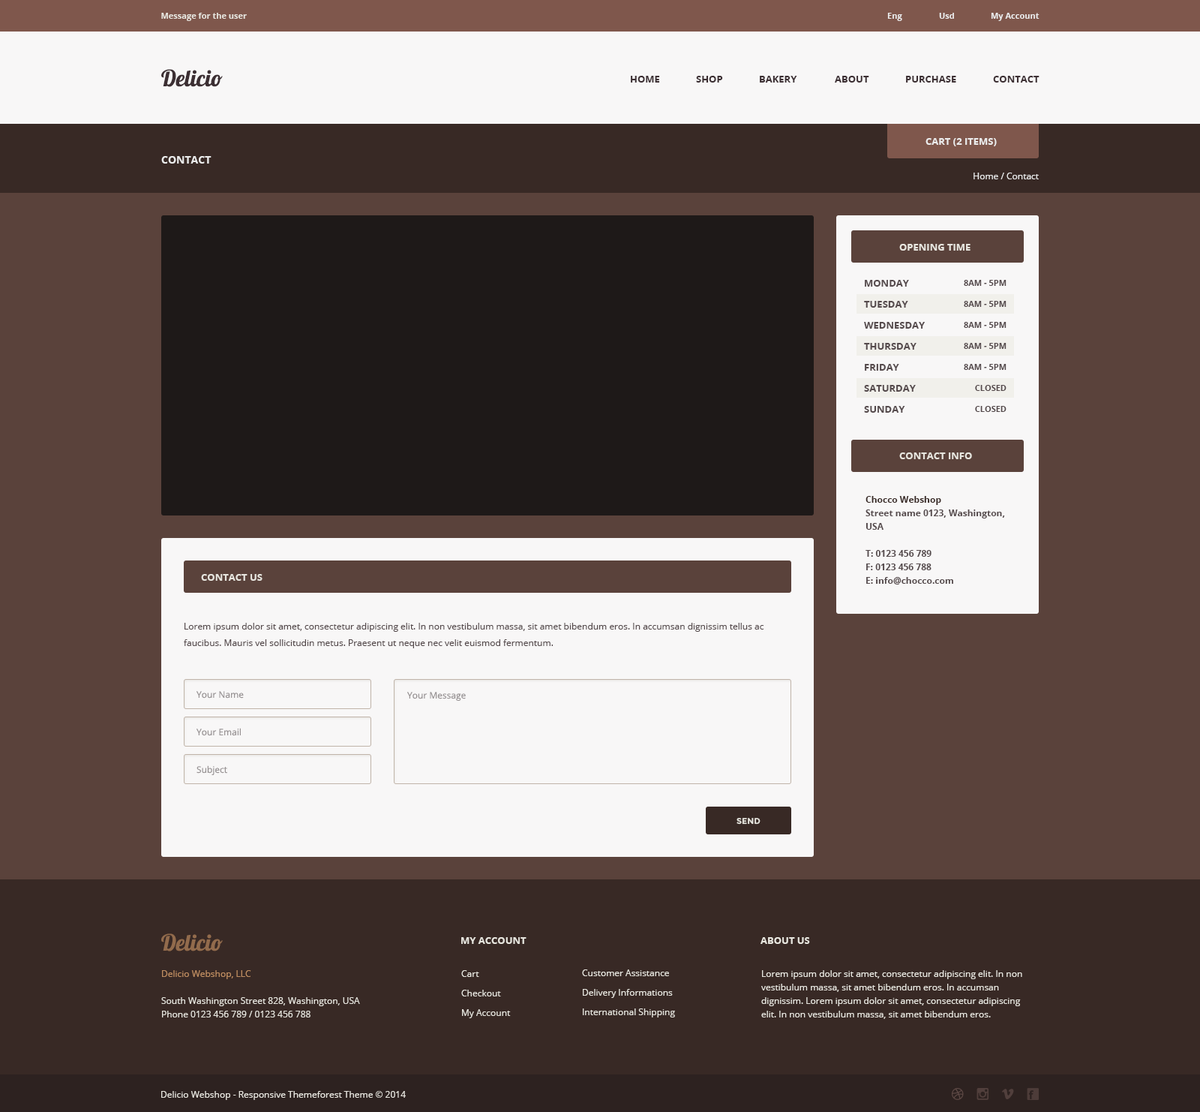
<style>
.page{position:relative;width:1200px;height:1112px;background:#5a423b}
.page>*{position:absolute;margin:0}
.t1{font:8.2px "OpenSans-Bold";color:#e7e5de}
.t2{font:8.2px "OpenSans-Bold";color:#ebebeb}
.t3{font:22.5px "Lobster1.4";color:#3c2f33}
.t4{font:9.8px "OpenSans-Bold";color:#3c2f33}
.t5{font:9.8px "OpenSans-Bold";color:#ebebeb}
.t6{font:10.5px "OpenSans-Bold";color:#ebebeb}
.t7{font:9px "OpenSans";color:#ebebeb}
.t8{font:9.8px "OpenSans-Bold";color:#e7e5de}
.t9{font:9.8px/21px "OpenSans-Bold";color:#554a4c}
.t10{font:8.2px/21px "OpenSans-Bold";color:#554a4c}
.t11{font:9px/13.5px "OpenSans-Bold";color:#554a4c}
.t12{font:9px/13.5px "OpenSans-Bold";color:#382925}
.t13{font:9px/16.5px "OpenSans";color:#554a4c}
.t14{font:9px "OpenSans";color:#999495}
.t15{font:8.2px "Montserrat-Bold";color:#e7e5de}
.t16{font:22.5px "Lobster1.4";color:#926b4c}
.t17{font:9px/13.5px "OpenSans";color:#e7e5de}
.t18{font:9px/13.5px "OpenSans";color:#be8c60}
.t19{font:9px/19.5px "OpenSans";color:#e7e5de}
.t20{font:9px "OpenSans";color:#e7e5de}
</style>
<div class="page">
<p class="t1" style="left:161px;top:13px;width:86px;height:8px">Message for the user</p>
<p class="t2" style="left:887px;top:13px;width:15px;height:8px">Eng</p>
<p class="t2" style="left:939px;top:13px;width:15px;height:6px">Usd</p>
<p class="t2" style="left:991px;top:13px;width:49px;height:8px">My Account</p>
<p class="t3" style="left:161px;top:69px;width:62px;height:18px">Delicio</p>
<p class="t4" style="left:631px;top:76px;width:29px;height:6px">HOME</p>
<p class="t4" style="left:696px;top:76px;width:27px;height:6px">SHOP</p>
<p class="t4" style="left:760px;top:76px;width:37px;height:6px">BAKERY</p>
<p class="t4" style="left:835px;top:76px;width:34px;height:6px">ABOUT</p>
<p class="t4" style="left:906px;top:76px;width:50px;height:6px">PURCHASE</p>
<p class="t4" style="left:993px;top:76px;width:47px;height:6px">CONTACT</p>
<p class="t5" style="left:926px;top:138px;width:71px;height:8px">CART (2 ITEMS)</p>
<p class="t6" style="left:161px;top:156px;width:51px;height:8px">CONTACT</p>
<p class="t7" style="left:974px;top:172px;width:65px;height:7px">Home / Contact</p>
<p class="t8" style="left:899px;top:244px;width:71px;height:6px">OPENING TIME</p>
<p class="t9" style="left:864px;top:280px;width:61px;height:132px">MONDAY<br>TUESDAY<br>WEDNESDAY<br>THURSDAY<br>FRIDAY<br>SATURDAY<br>SUNDAY</p>
<p class="t10" style="left:964px;top:280px;width:42px;height:132px;text-align:right">8AM - 5PM<br>8AM - 5PM<br>8AM - 5PM<br>8AM - 5PM<br>8AM - 5PM<br>CLOSED<br>CLOSED</p>
<p class="t8" style="left:899px;top:452px;width:73px;height:7px">CONTACT INFO</p>
<p class="t11" style="left:866px;top:496px;width:139px;height:88px"><span class="t12">Chocco Webshop<br></span>Street name 0123, Washington, USA <br><br>T: 0123 456 789 <br>F: 0123 456 788<br>E: info@chocco.com</p>
<p class="t8" style="left:201px;top:574px;width:61px;height:6px">CONTACT US</p>
<p class="t13" style="left:184px;top:622px;width:580px;height:26px">Lorem ipsum dolor sit amet, consectetur adipiscing elit. In non vestibulum massa, sit amet bibendum eros. In accumsan dignissim tellus ac faucibus. Mauris vel sollicitudin metus. Praesent ut neque nec velit euismod fermentum.</p>
<p class="t14" style="left:196px;top:691px;width:48px;height:7px">Your Name</p>
<p class="t14" style="left:407px;top:692px;width:59px;height:8px">Your Message</p>
<p class="t14" style="left:196px;top:728px;width:45px;height:8px">Your Email</p>
<p class="t14" style="left:196px;top:765px;width:31px;height:10px">Subject</p>
<p class="t15" style="left:736px;top:818px;width:24px;height:6px">SEND</p>
<p class="t16" style="left:161px;top:933px;width:62px;height:18px">Delicio</p>
<p class="t8" style="left:461px;top:937px;width:65px;height:7px">MY ACCOUNT</p>
<p class="t8" style="left:760px;top:937px;width:50px;height:7px">ABOUT US</p>
<p class="t17" style="left:161px;top:970px;width:199px;height:47px"><span class="t18">Delicio Webshop, LLC<br><br></span>South Washington Street 828, Washington, USA <br>Phone 0123 456 789 / 0123 456 788</p>
<p class="t19" style="left:461px;top:970px;width:50px;height:48px">Cart         <br>Checkout<br>My Account</p>
<p class="t19" style="left:582px;top:969px;width:93px;height:48px">Customer Assistance<br>Delivery Informations<br>International Shipping</p>
<p class="t17" style="left:761px;top:970px;width:261px;height:48px">Lorem ipsum dolor sit amet, consectetur adipiscing elit. In non vestibulum massa, sit amet bibendum eros. In accumsan dignissim. Lorem ipsum dolor sit amet, consectetur adipiscing elit. In non vestibulum massa, sit amet bibendum eros.</p>
<p class="t20" style="left:161px;top:1090px;width:245px;height:10px">Delicio Webshop - Responsive Themeforest Theme © 2014</p>
</div>
